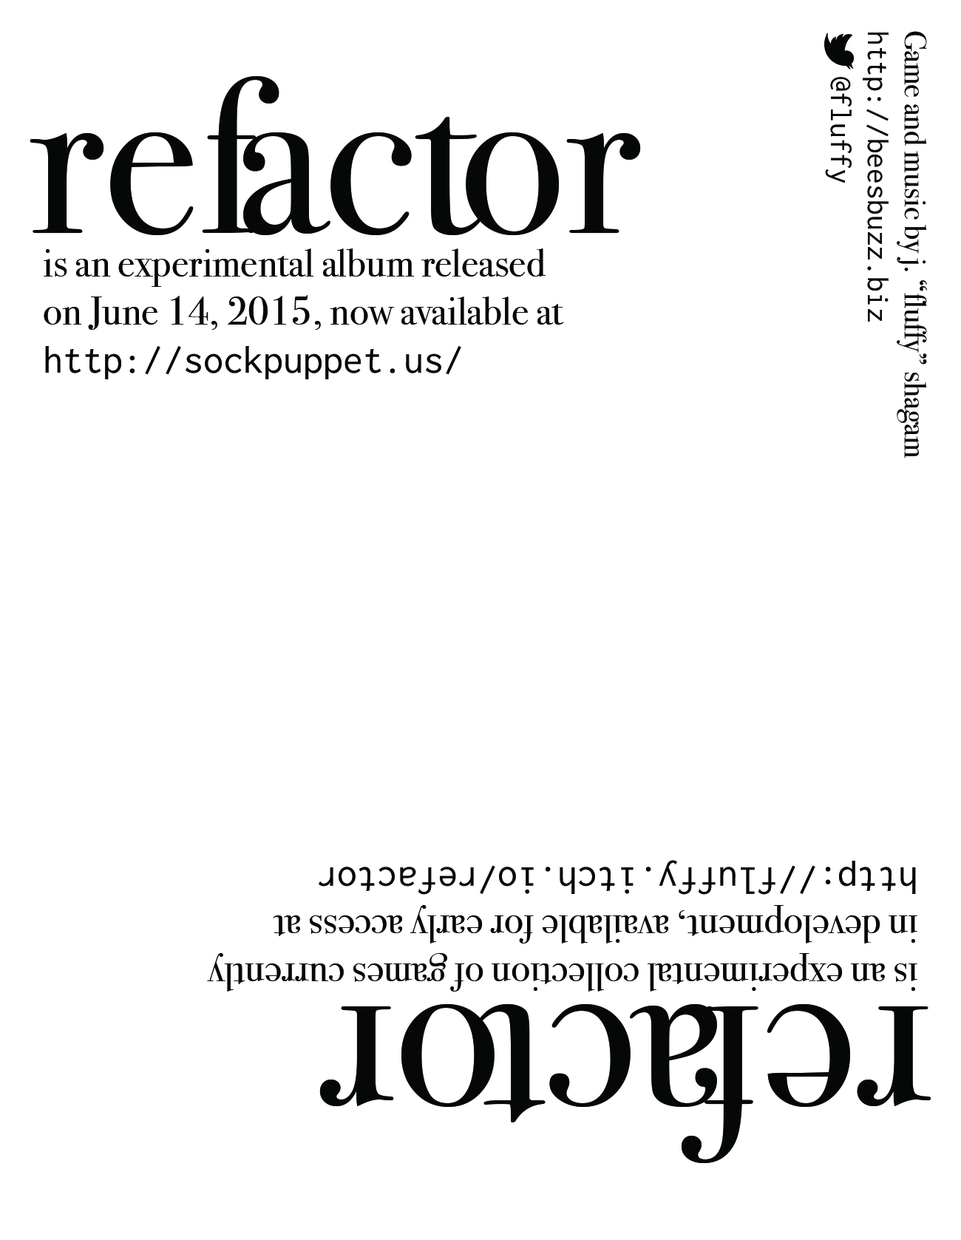
<style>
.page{position:relative;width:961px;height:1240px;background:#ffffff}
.page>*{position:absolute;margin:0}
.t1{font:30.8px "BodoniSvtyTwoITCTT-Book";color:#060808}
.t2{font:30.8px "Inconsolata";color:#060808}
.t3{font:221.9px "BodoniSvtyTwoITCTT-Book";color:#060808}
.t4{font:40.1px "BodoniSvtyTwoITCTT-Book";color:#060808}
.t5{font:40.1px "Inconsolata";color:#060808}
</style>
<div class="page">
<p class="t1" style="left:825px;top:31px;width:102px;height:428px;rotate:90deg">Game and music by j. “fluffy” shagam<br><span class="t2">http://beesbuzz.biz<br>   @fluffy</span></p>
<p class="t3" style="left:30px;top:76px;width:611px;height:159px">refactor</p>
<p class="t4" style="left:44px;top:248px;width:520px;height:131px">is an experimental album released on June 14, 2015, now available at<br><span class="t5">http://sockpuppet.us/</span></p>
<p class="t4" style="left:207px;top:860px;width:711px;height:132px;rotate:180deg">is an experimental collection of games currently in development, available for early access at<br><span class="t5">http://fluffy.itch.io/refactor</span></p>
<p class="t3" style="left:319px;top:1004px;width:612px;height:159px;rotate:180deg">refactor</p>
</div>
